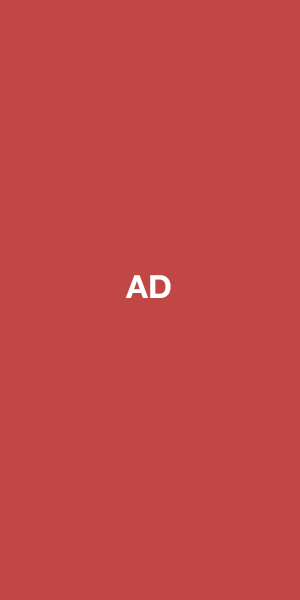
<style>
.page{position:relative;width:300px;height:600px;background:#c14746}
.page>*{position:absolute;margin:0}
.t1{font:32px "HelveticaNeue-Bold";color:#ffffff}
</style>
<div class="page">
<p class="t1" style="left:125px;top:275px;width:46px;height:23px">AD</p>
</div>
